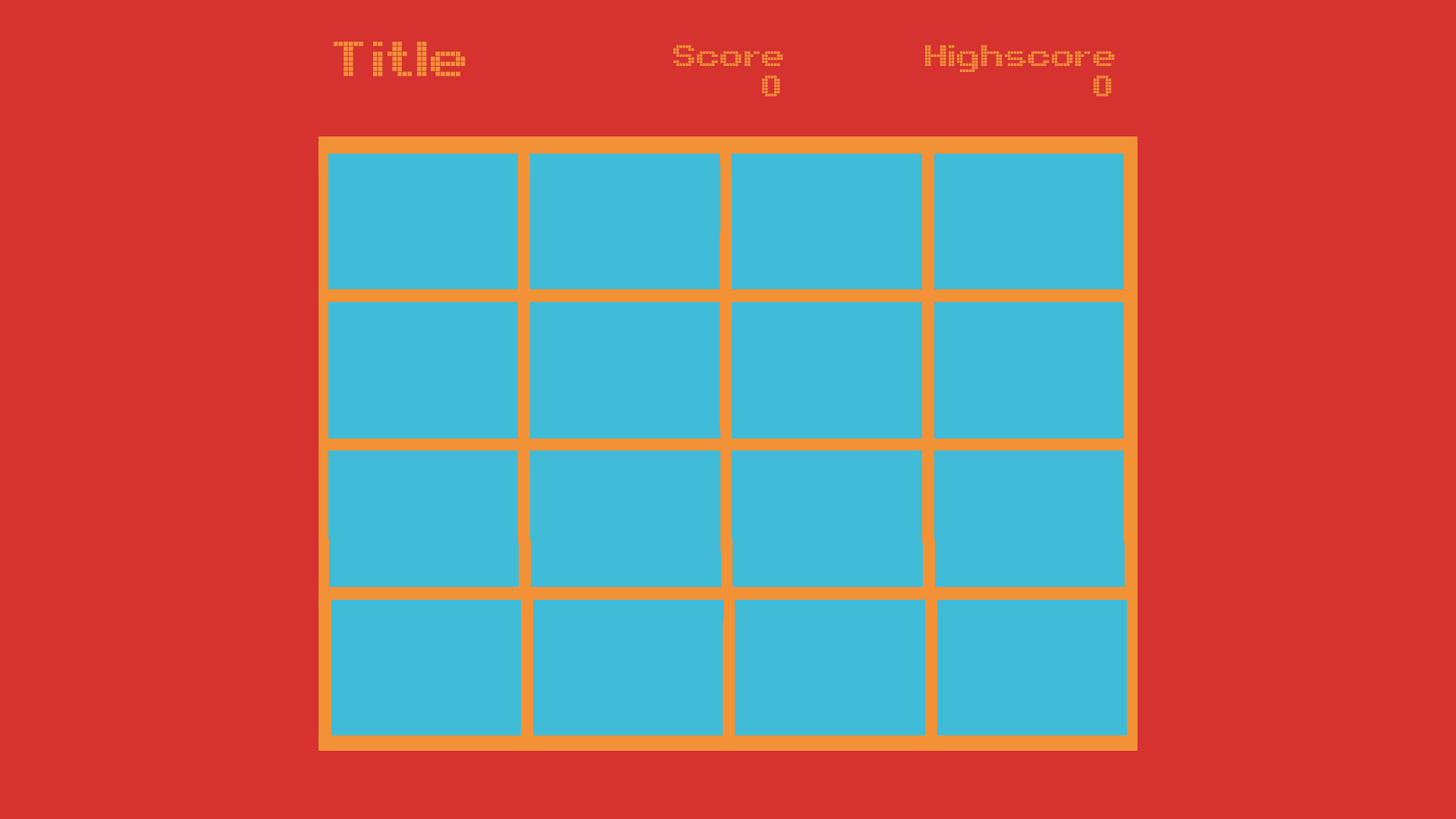
<style>
.page{position:relative;width:1456px;height:819px;background:#d63230}
.page>*{position:absolute;margin:0}
.t1{font:75.8px "Arcade";color:#f39137}
.t2{font:45.5px "Arcade";color:#f39137}
</style>
<div class="page">
<p class="t1" style="left:334px;top:42px;width:132px;height:35px">Title</p>
<p class="t2" style="left:673px;top:45px;width:110px;height:21px">Score</p>
<p class="t2" style="left:925px;top:45px;width:190px;height:27px">Highscore</p>
<p class="t2" style="left:762px;top:75px;width:18px;height:21px">0</p>
<p class="t2" style="left:1094px;top:75px;width:18px;height:21px">0</p>
</div>
